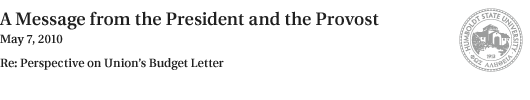
<style>
.page{position:relative;width:530px;height:100px;background:#ffffff}
.page>*{position:absolute;margin:0}
.t1{font:18px/21px "Utopia-Semibold";color:#202020}
.t2{font:12px/18px "Utopia-Semibold";color:#202020}
.t3{font:12px/24px "Utopia-Semibold";color:#202020}
</style>
<div class="page">
<p class="t1" style="left:0px;top:11px;width:379px;height:59px">A Message from the President and the Provost<br><span class="t2">May 7, 2010<br></span><span class="t3">Re: Perspective on Union’s Budget Letter</span></p>
</div>
